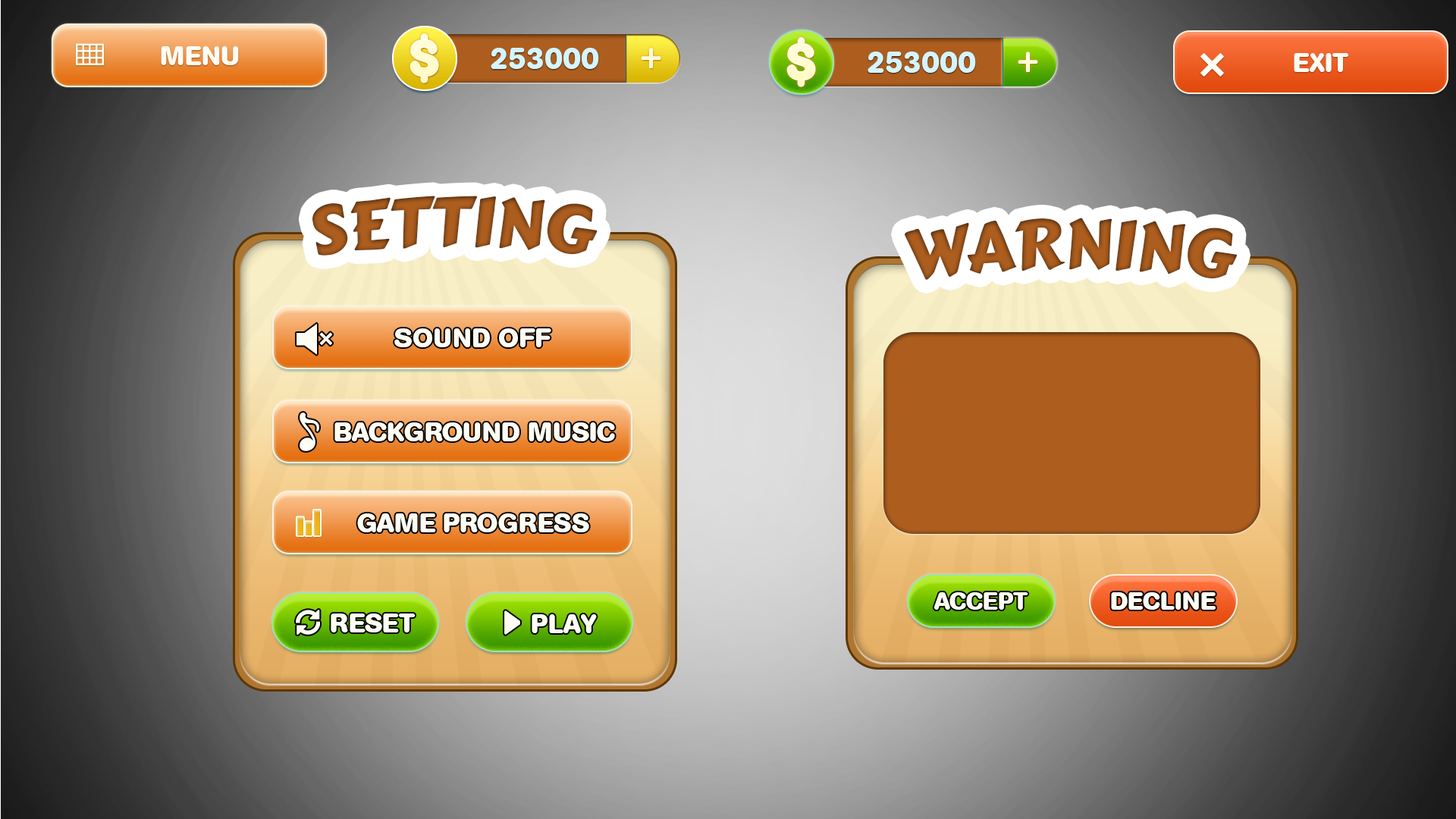
<style>
.page{position:relative;width:1456px;height:819px}
.page>*{position:absolute;margin:0}
.t1{font:26.5px "AGBookRounded-Bold";color:#fdfdf3;text-transform:uppercase}
.t2{font:30.3px "AGBookRounded-Bold";color:#d4f5ff;text-transform:uppercase}
.t3{font:68.2px "CarterOne";color:#a0571c;text-transform:uppercase}
.t4{font:68.2px "CarterOne";color:#a1581c;text-transform:uppercase}
.t5{font:24.3px "AGBookRounded-Bold";color:#fdfdf3;text-transform:uppercase}
.t6{font:25px "AGBookRounded-Bold";color:#fdfdf3;text-transform:uppercase}
</style>
<div class="page">
<p class="t1" style="left:161px;top:46px;width:78px;height:19px">MENU</p>
<p class="t2" style="left:491px;top:48px;width:108px;height:21px">253000</p>
<p class="t2" style="left:868px;top:52px;width:108px;height:21px">253000</p>
<p class="t1" style="left:1294px;top:53px;width:55px;height:19px">EXIT</p>
<p class="t3" style="left:312px;top:196px;width:286px;height:60px">SETTING</p>
<p class="t4" style="left:905px;top:218px;width:332px;height:62px">WARNING</p>
<p class="t1" style="left:394px;top:328px;width:157px;height:19px">SOUND OFF</p>
<p class="t1" style="left:334px;top:422px;width:281px;height:19px">BACKGROUND MUSIC</p>
<p class="t1" style="left:357px;top:513px;width:232px;height:19px">GAME PROGRESS</p>
<p class="t5" style="left:933px;top:592px;width:95px;height:18px">ACCEPT</p>
<p class="t6" style="left:1111px;top:592px;width:105px;height:18px">DECLINE</p>
<p class="t1" style="left:331px;top:613px;width:85px;height:19px">RESET</p>
<p class="t1" style="left:532px;top:614px;width:65px;height:19px">PLAY</p>
</div>
